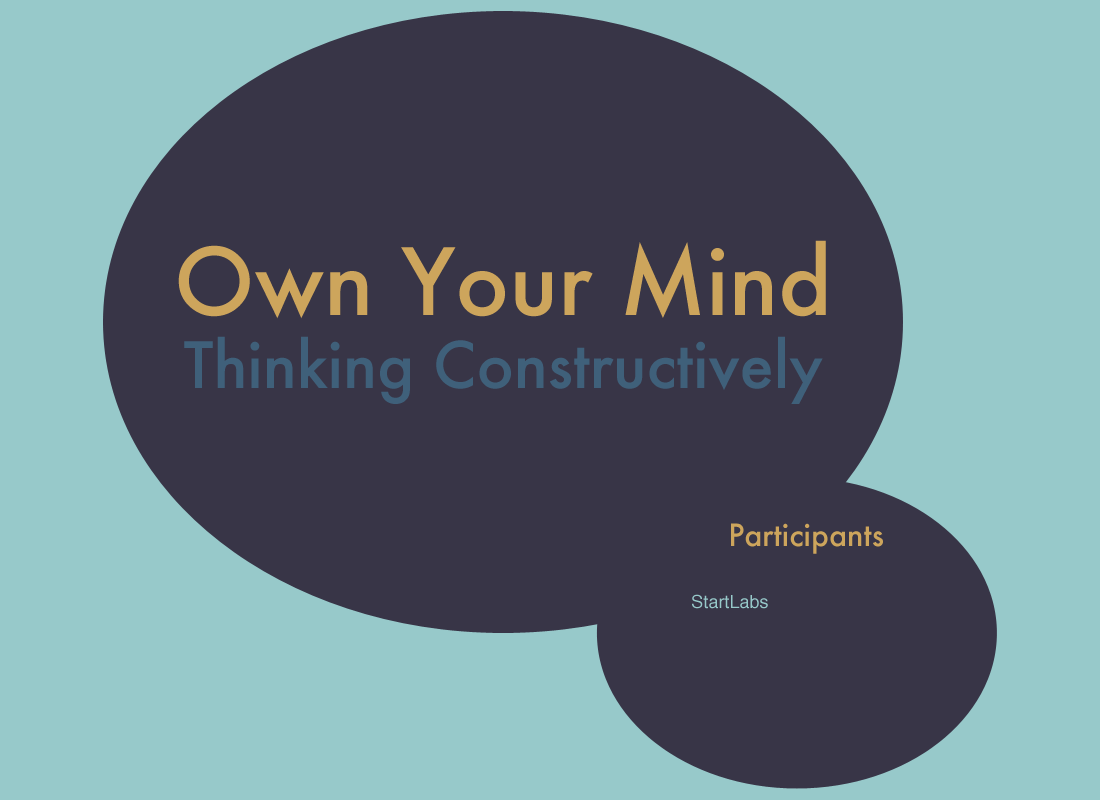
<style>
.page{position:relative;width:1100px;height:800px;background:#383547}
.page>*{position:absolute;margin:0}
.t1{font:90px "Futura-Medium";color:#cda55c}
.t2{font:61.9px "Futura-Medium";color:#3f607a}
.t3{font:30px "Futura-Medium";color:#cda55c}
.t4{font:18px "Helvetica";color:#97c9ca}
</style>
<div class="page">
<p class="t1" style="left:178px;top:240px;width:648px;height:79px">Own Your Mind</p>
<p class="t2" style="left:184px;top:336px;width:639px;height:68px">Thinking Constructively</p>
<p class="t3" style="left:731px;top:523px;width:152px;height:31px">Participants</p>
<p class="t4" style="left:692px;top:594px;width:76px;height:15px">StartLabs</p>
</div>
